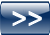
<style>
.page{position:relative;width:50px;height:35px}
.page>*{position:absolute;margin:0}
.t1{font:32px "Calibri-Bold";color:#f8fafc}
</style>
<div class="page">
<p class="t1" style="left:12px;top:11px;width:30px;height:15px">&gt;&gt;</p>
</div>
